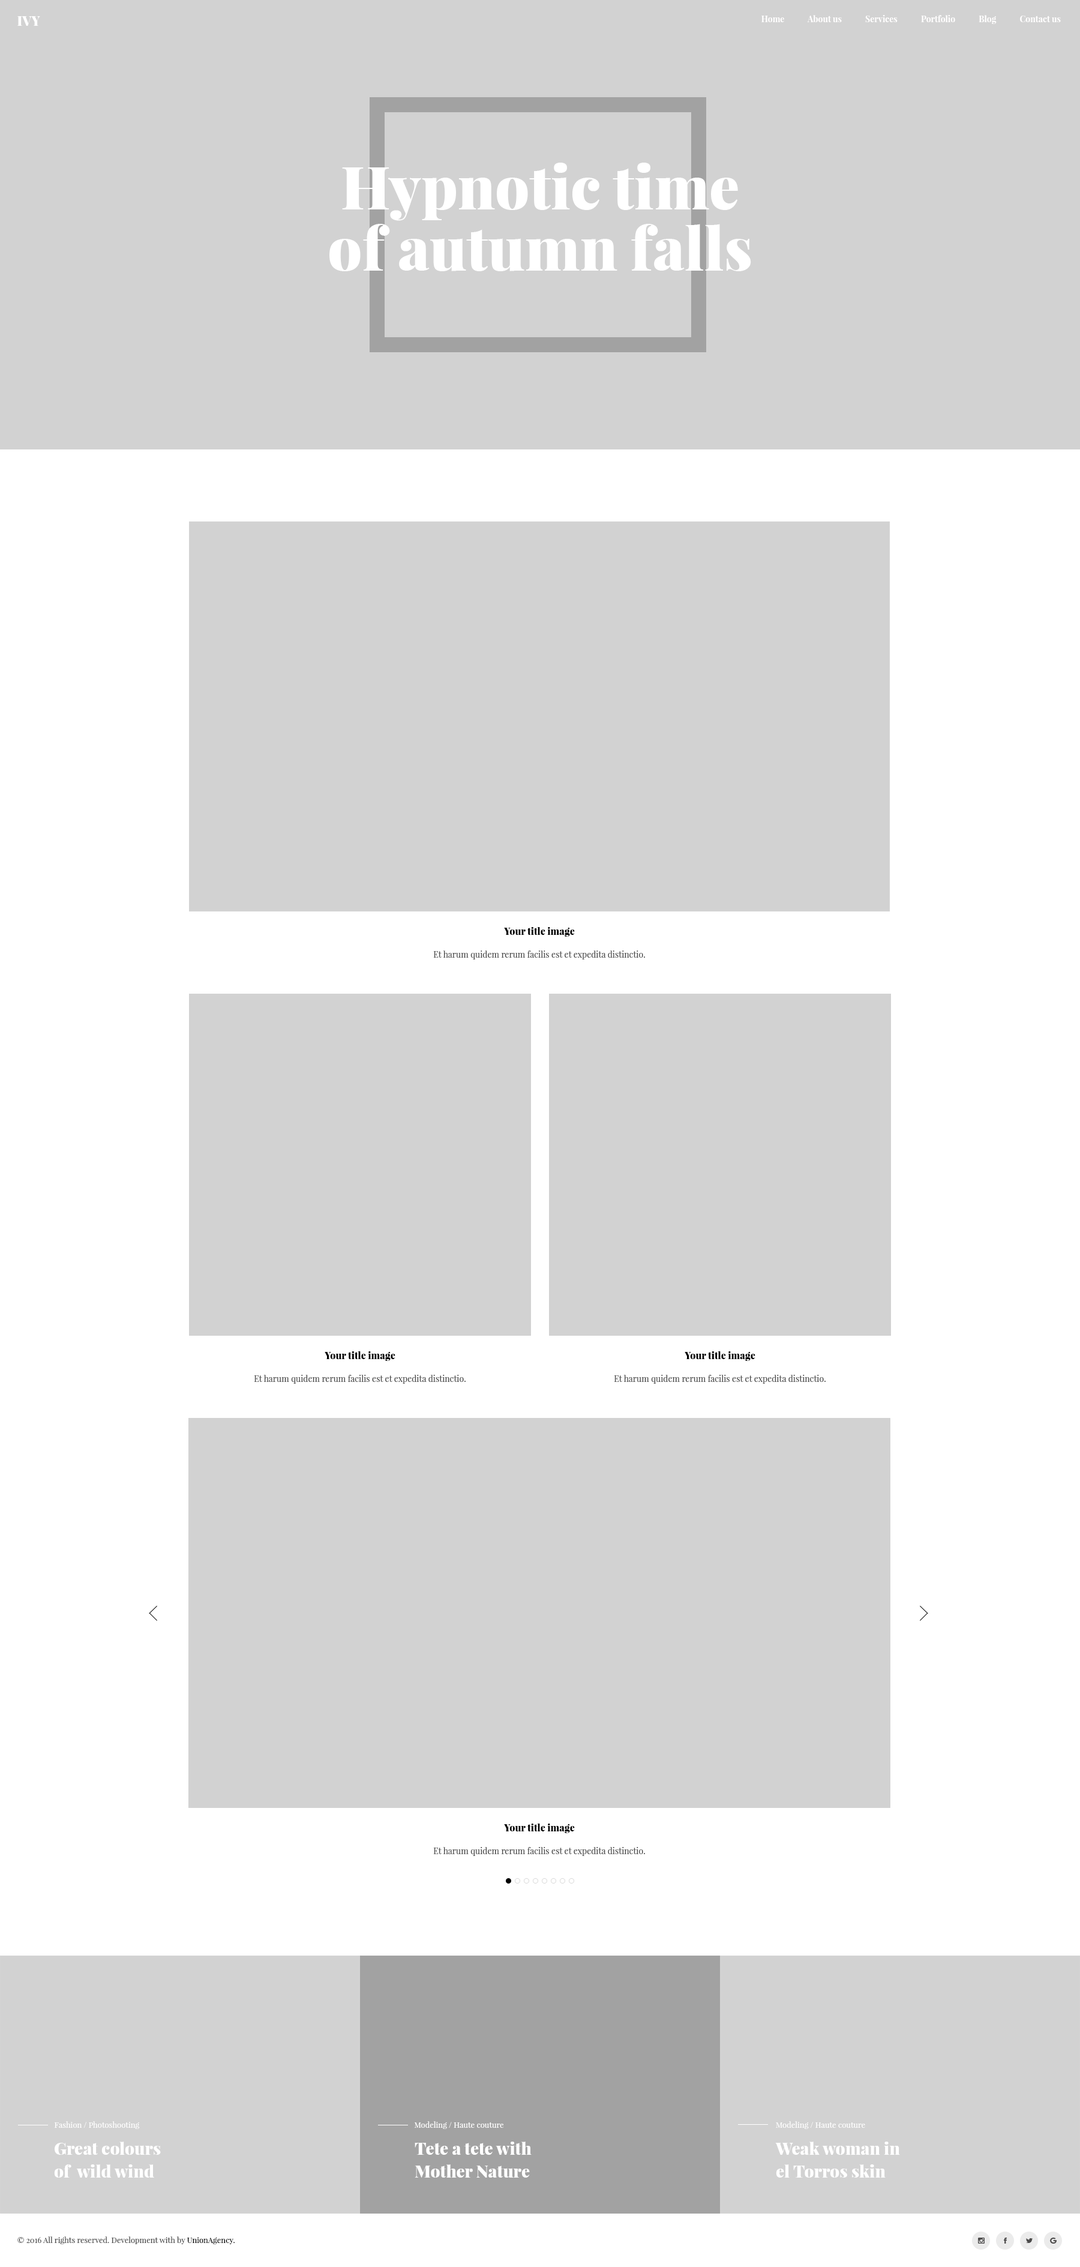
<style>
.page{position:relative;width:1080px;height:2267px;background:#d2d2d2}
.page>*{position:absolute;margin:0}
.t1{font:13.2px "PlayfairDisplay-Black";color:#ffffff}
.t2{font:8.4px "PlayfairDisplay-Bold";color:#fffefe}
.t3{font:60px/61.2px "PlayfairDisplay-Black";color:#ffffff}
.t4{font:9.6px "PlayfairDisplay-Black";color:#000000}
.t5{font:8.4px "PlayfairDisplay-Regular";color:#494949}
.t6{font:7.8px "PlayfairDisplay-Regular";color:#ffffff}
.t7{font:16.8px/22.8px "PlayfairDisplay-Black";color:#ffffff}
.t8{font:7.8px "PlayfairDisplay-Regular";color:#494949}
.t9{font:7.8px "PlayfairDisplay-Regular";color:#000000}
</style>
<div class="page">
<p class="t1" style="left:17px;top:16px;width:23px;height:10px">IVY</p>
<p class="t2" style="left:761px;top:15px;width:300px;height:9px">Home            About us            Services            Portfolio            Blog            Contact us</p>
<p class="t3" style="left:329px;top:163px;width:422px;height:108px;text-align:center">Hypnotic time<br>of autumn falls</p>
<p class="t4" style="left:504px;top:927px;width:71px;height:10px">Your title image</p>
<p class="t5" style="left:433px;top:950px;width:212px;height:9px">Et harum quidem rerum facilis est et expedita distinctio.</p>
<p class="t4" style="left:325px;top:1351px;width:70px;height:10px">Your title image</p>
<p class="t4" style="left:685px;top:1351px;width:70px;height:10px">Your title image</p>
<p class="t5" style="left:254px;top:1375px;width:212px;height:9px">Et harum quidem rerum facilis est et expedita distinctio.</p>
<p class="t5" style="left:614px;top:1375px;width:212px;height:9px">Et harum quidem rerum facilis est et expedita distinctio.</p>
<p class="t4" style="left:504px;top:1823px;width:71px;height:10px">Your title image</p>
<p class="t5" style="left:433px;top:1847px;width:212px;height:9px">Et harum quidem rerum facilis est et expedita distinctio.</p>
<p class="t6" style="left:54px;top:2121px;width:86px;height:8px">Fashion / Photoshooting</p>
<p class="t6" style="left:414px;top:2121px;width:90px;height:8px">Modeling / Haute couture</p>
<p class="t6" style="left:776px;top:2121px;width:89px;height:8px">Modeling / Haute couture</p>
<p class="t7" style="left:54px;top:2141px;width:107px;height:36px">Great colours<br>of  wild wind</p>
<p class="t7" style="left:415px;top:2141px;width:117px;height:36px">Tete a tete with<br>Mother Nature</p>
<p class="t7" style="left:775px;top:2141px;width:125px;height:36px">Weak woman in<br>el Torros skin</p>
<p class="t8" style="left:17px;top:2236px;width:218px;height:8px">© 2016 All rights reserved. Development with by <span class="t9">UnionAgency.</span></p>
</div>
